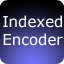
<style>
.page{position:relative;width:64px;height:64px}
.page>*{position:absolute;margin:0}
.t1{font:14.9px "Verdana";color:#ffffff}
</style>
<div class="page">
<p class="t1" style="left:3px;top:15px;width:60px;height:31px">Indexed<br>Encoder</p>
</div>
